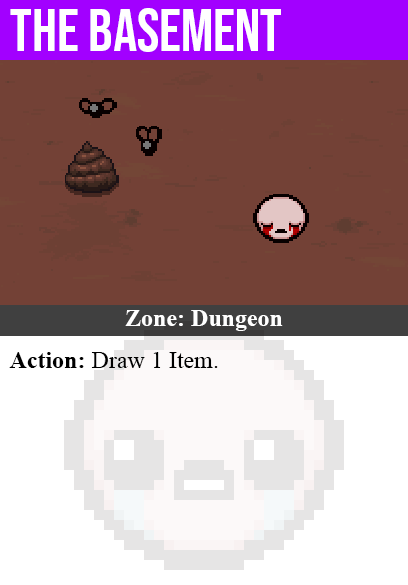
<style>
.page{position:relative;width:408px;height:585px;background:#734136}
.page>*{position:absolute;margin:0}
.t1{font:60px "BebasNeue-Regular";color:#ffffff}
.t2{font:24px "TimesNewRomanPS-BoldMT";color:#ffffff}
.t3{font:24px "TimesNewRomanPSMT";color:#000000}
.t4{font:24px "TimesNewRomanPS-BoldMT";color:#000000}
</style>
<div class="page">
<p class="t1" style="left:10px;top:8px;width:271px;height:44px">the basement</p>
<p class="t2" style="left:125px;top:310px;width:158px;height:21px">Zone: Dungeon</p>
<p class="t3" style="left:9px;top:352px;width:209px;height:16px"><span class="t4">Action:</span> Draw 1 Item.</p>
</div>
